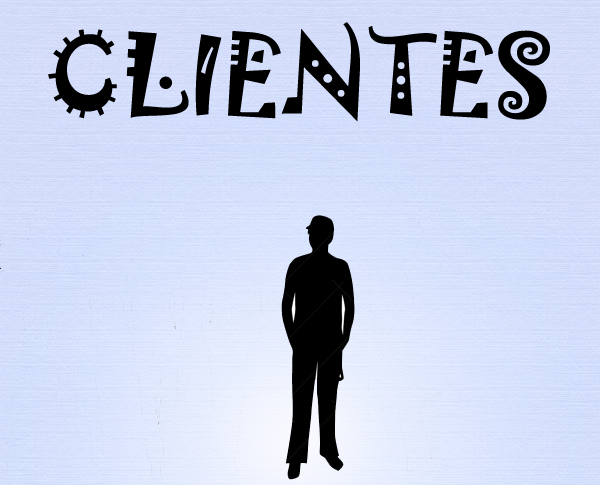
<style>
.page{position:relative;width:600px;height:485px}
.page>*{position:absolute;margin:0}
.t1{font:100px "Jokerman-Regular";color:#000001}
</style>
<div class="page">
<p class="t1" style="left:48px;top:22px;width:502px;height:100px">CLIENTES</p>
</div>
